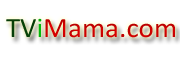
<style>
.page{position:relative;width:180px;height:59px;background:#ffffff}
.page>*{position:absolute;margin:0}
.t1{font:28.1px "Calibri";color:#c60000;scale:1.03 1}
</style>
<div class="page">
<p class="t1" style="left:6px;top:18px;width:169px;height:20px">TViMama.com</p>
</div>
